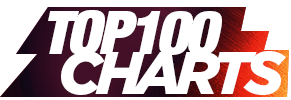
<style>
.page{position:relative;width:291px;height:100px;background:#ffffff}
.page>*{position:absolute;margin:0}
.t1{font:60px "HelveticaNeueLTStd-XBlkCnO";letter-spacing:-0.05em;color:#ffffff}
.t2{font:60px "Gotham-BlackItalic";letter-spacing:-0.1em;color:#ffffff;text-transform:uppercase}
</style>
<div class="page">
<p class="t1" style="left:48px;top:10px;width:174px;height:45px">TOP100</p>
<p class="t2" style="left:61px;top:51px;width:225px;height:44px">charts</p>
</div>
